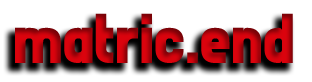
<style>
.page{position:relative;width:312px;height:82px;background:#ffffff}
.page>*{position:absolute;margin:0}
.t1{font:72px "FrontPageNews1.1"}
</style>
<div class="page">
<p class="t1" style="left:15px;top:13px;width:278px;height:50px">matric.end</p>
</div>
